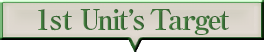
<style>
.page{position:relative;width:264px;height:52px;background:#ffffff}
.page>*{position:absolute;margin:0}
.t1{font:28px "RyuminPro-ExBold";letter-spacing:-0.08em;color:#3d6f39}
.t2{font:28px "RyuminPro-ExBold";color:#3d6f39}
</style>
<div class="page">
<p class="t1" style="left:38px;top:9px;width:191px;height:26px"><span class="t2">1st</span> Unit’s Target</p>
</div>
